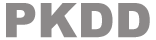
<style>
.page{position:relative;width:156px;height:40px;background:#8c8989}
.page>*{position:absolute;margin:0}
.t1{font:48px "Arial-Black";color:#8c8989}
</style>
<div class="page">
<p class="t1" style="left:6px;top:3px;width:144px;height:35px">PKDD</p>
</div>
